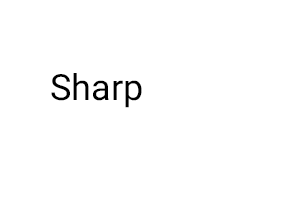
<style>
.page{position:relative;width:300px;height:200px;background:#ffffff}
.page>*{position:absolute;margin:0}
.t1{font:36px "Roboto-Regular";color:#000000}
</style>
<div class="page">
<p class="t1" style="left:51px;top:73px;width:91px;height:35px">Sharp</p>
</div>
